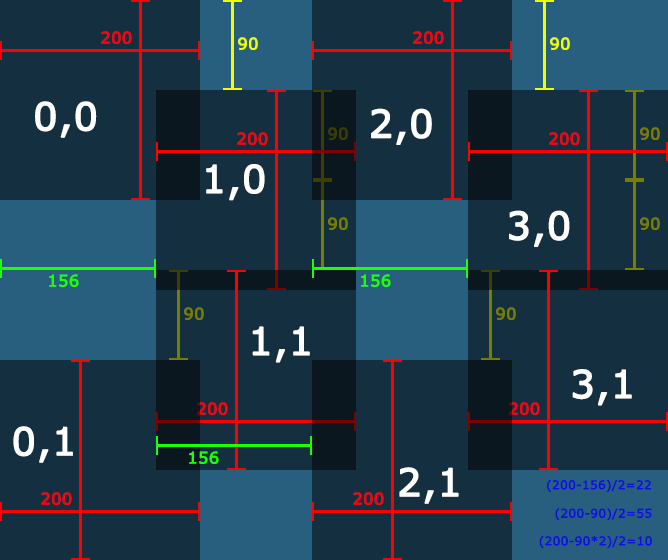
<style>
.page{position:relative;width:668px;height:560px;background:#142f3f}
.page>*{position:absolute;margin:0}
.t1{font:16px "Verdana";color:#ff000c;font-weight:bold}
.t2{font:16px "Verdana";color:#f0ff00;font-weight:bold}
.t3{font:38px "Verdana";color:#ffffff;font-weight:bold}
.t4{font:16px "Verdana";color:#3c3f00;font-weight:bold}
.t5{font:16px "Verdana";color:#787f00;font-weight:bold}
.t6{font:16px "Verdana";color:#1eff00;font-weight:bold}
.t7{font:12px "Verdana";color:#0f0fe0;font-weight:bold}
</style>
<div class="page">
<p class="t1" style="left:101px;top:31px;width:31px;height:13px">200</p>
<p class="t2" style="left:238px;top:37px;width:20px;height:13px">90</p>
<p class="t1" style="left:413px;top:31px;width:31px;height:13px">200</p>
<p class="t2" style="left:550px;top:37px;width:20px;height:13px">90</p>
<p class="t3" style="left:35px;top:101px;width:62px;height:37px">0,0</p>
<p class="t3" style="left:371px;top:108px;width:61px;height:37px">2,0</p>
<p class="t1" style="left:237px;top:132px;width:31px;height:13px">200</p>
<p class="t4" style="left:328px;top:127px;width:20px;height:13px">90</p>
<p class="t1" style="left:549px;top:132px;width:31px;height:13px">200</p>
<p class="t5" style="left:640px;top:127px;width:20px;height:13px">90</p>
<p class="t3" style="left:206px;top:164px;width:59px;height:37px">1,0</p>
<p class="t5" style="left:328px;top:217px;width:20px;height:13px">90</p>
<p class="t3" style="left:509px;top:210px;width:61px;height:37px">3,0</p>
<p class="t5" style="left:640px;top:217px;width:20px;height:13px">90</p>
<p class="t6" style="left:49px;top:274px;width:30px;height:13px">156</p>
<p class="t6" style="left:361px;top:274px;width:30px;height:13px">156</p>
<p class="t5" style="left:184px;top:307px;width:20px;height:13px">90</p>
<p class="t5" style="left:496px;top:307px;width:20px;height:13px">90</p>
<p class="t3" style="left:252px;top:326px;width:58px;height:37px">1,1</p>
<p class="t3" style="left:572px;top:369px;width:60px;height:37px">3,1</p>
<p class="t1" style="left:197px;top:402px;width:31px;height:13px">200</p>
<p class="t1" style="left:509px;top:402px;width:31px;height:13px">200</p>
<p class="t3" style="left:13px;top:426px;width:60px;height:37px">0,1</p>
<p class="t6" style="left:189px;top:451px;width:30px;height:13px">156</p>
<p class="t3" style="left:399px;top:467px;width:60px;height:37px">2,1</p>
<p class="t7" style="left:547px;top:479px;width:105px;height:13px">(200-156)/2=22</p>
<p class="t1" style="left:41px;top:492px;width:31px;height:13px">200</p>
<p class="t1" style="left:353px;top:492px;width:31px;height:13px">200</p>
<p class="t7" style="left:555px;top:508px;width:97px;height:13px">(200-90)/2=55</p>
<p class="t7" style="left:539px;top:535px;width:113px;height:13px">(200-90*2)/2=10</p>
</div>
